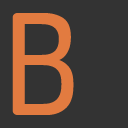
<style>
.page{position:relative;width:128px;height:128px;background:#333333}
.page>*{position:absolute;margin:0}
.t1{font:140px "Dosis-Medium";color:#e27b40}
</style>
<div class="page">
<p class="t1" style="left:12px;top:13px;width:62px;height:102px">B</p>
</div>
